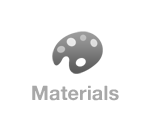
<style>
.page{position:relative;width:150px;height:130px;background:#ffffff}
.page>*{position:absolute;margin:0}
.t1{font:20px "AlteHaasGrotesk_Bold";color:#a8a8a8}
</style>
<div class="page">
<p class="t1" style="left:32px;top:85px;width:87px;height:16px">Materials</p>
</div>
